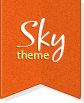
<style>
.page{position:relative;width:84px;height:103px}
.page>*{position:absolute;margin:0}
.t1{font:36px "BlackJackRegular";color:#ffffff}
.t2{font:12px "MyriadPro-Regular";color:#ffe898}
</style>
<div class="page">
<p class="t1" style="left:17px;top:18px;width:48px;height:44px">Sky</p>
<p class="t2" style="left:16px;top:50px;width:33px;height:9px">theme</p>
</div>
